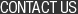
<style>
.page{position:relative;width:78px;height:14px;background:#333333}
.page>*{position:absolute;margin:0}
.t1{font:16.4px "HelveticaNeueLTPro-LtCn";color:#ffffff}
</style>
<div class="page">
<p class="t1" style="left:0px;top:1px;width:77px;height:12px">CONTACT US</p>
</div>
